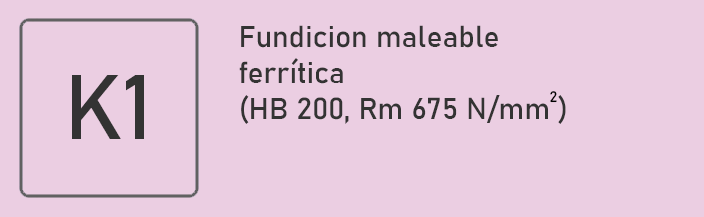
<style>
.page{position:relative;width:704px;height:217px;background:#ebcee2}
.page>*{position:absolute;margin:0}
.t1{font:30px "Bahnschrift";color:#333333}
.t2{font:90px "Bahnschrift";color:#333333}
.t3{font:15px "Bahnschrift";color:#000000}
</style>
<div class="page">
<p class="t1" style="left:239px;top:25px;width:327px;height:99px">Fundicion maleable<br>ferrítica<br>(HB 200, Rm 675 N/mm )</p>
<p class="t2" style="left:72px;top:75px;width:72px;height:64px">K1</p>
<p class="t3" style="left:550px;top:91px;width:7px;height:12px">2</p>
</div>
